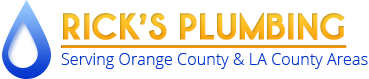
<style>
.page{position:relative;width:369px;height:79px;background:#ffffff}
.page>*{position:absolute;margin:0}
.t1{font:37.5px "Champagne&LimousinesThick-Bold";font-weight:bold;text-decoration:underline}
.t2{font:16.2px "OpenSans-Light";color:#0033cc}
</style>
<div class="page">
<p class="t1" style="left:61px;top:12px;width:286px;height:36px">RICK’S PLUMBING</p>
<p class="t2" style="left:61px;top:53px;width:307px;height:16px">Serving Orange County &amp; LA County Areas</p>
</div>
